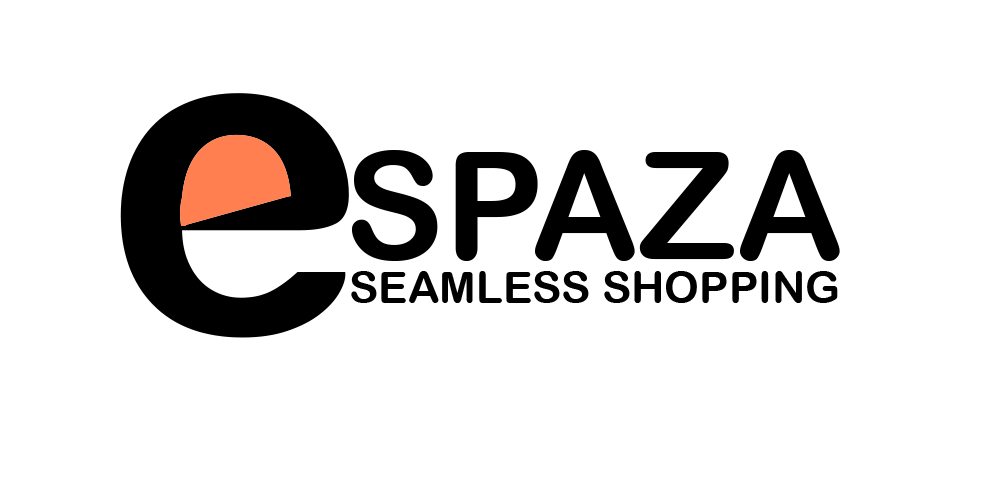
<style>
.page{position:relative;width:1000px;height:500px;background:#ffffff}
.page>*{position:absolute;margin:0}
.t1{font:150px "ArialRoundedMTBold";color:#000000}
.t2{font:44px "ArialRoundedMTBold";color:#000000}
</style>
<div class="page">
<p class="t1" style="left:351px;top:150px;width:489px;height:111px">SPAZA</p>
<p class="t2" style="left:351px;top:271px;width:487px;height:32px">SEAMLESS SHOPPING</p>
</div>
